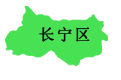
<style>
.page{position:relative;width:121px;height:80px;background:#ffffff}
.page>*{position:absolute;margin:0}
.t1{font:15.7px "NSimSun";letter-spacing:0.12em;color:#0c0c0c;font-weight:bold}
</style>
<div class="page">
<p class="t1" style="left:39px;top:27px;width:51px;height:15px">长宁区</p>
</div>
